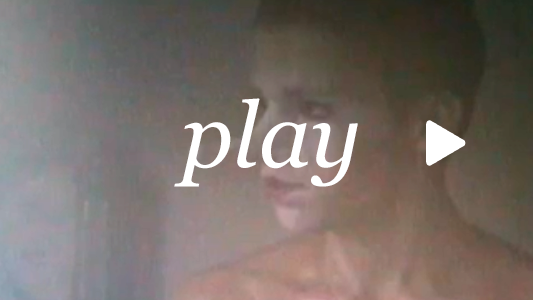
<style>
.page{position:relative;width:533px;height:300px}
.page>*{position:absolute;margin:0}
.t1{font:90.5px "Georgia-Italic";color:#ffffff}
</style>
<div class="page">
<p class="t1" style="left:174px;top:98px;width:184px;height:89px">play</p>
</div>
